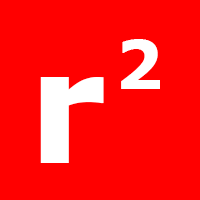
<style>
.page{position:relative;width:200px;height:200px;background:#ff0000}
.page>*{position:absolute;margin:0}
.t1{font:68px "Verdana-Bold";letter-spacing:-0.1em;color:#ffffff}
.t2{font:157px "Verdana-Bold";letter-spacing:-0.1em;color:#ffffff}
</style>
<div class="page">
<p class="t1" style="left:121px;top:39px;width:39px;height:50px">2</p>
<p class="t2" style="left:40px;top:77px;width:64px;height:86px">r</p>
</div>
